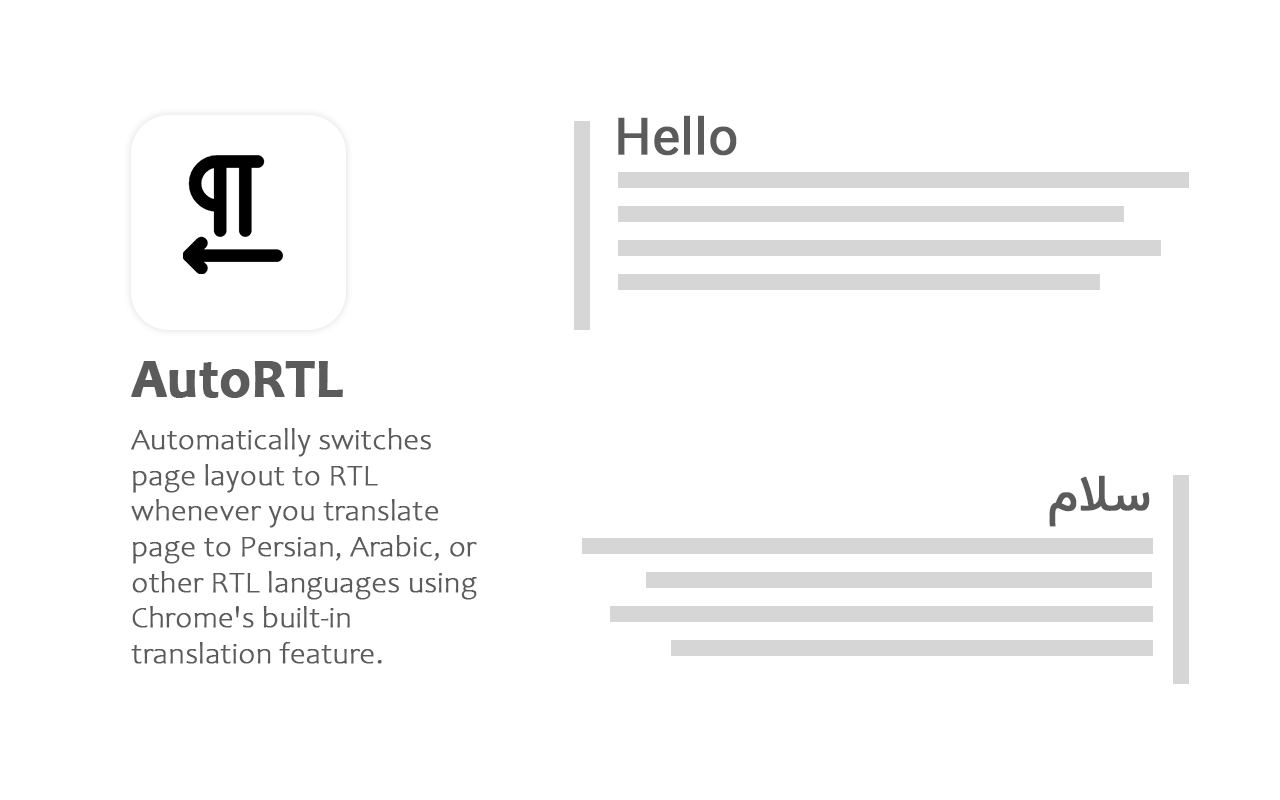
<style>
.page{position:relative;width:1280px;height:800px;background:#ffffff}
.page>*{position:absolute;margin:0}
.t1{font:51px "Vazirmatn-Regular";color:#5b5b5b;font-weight:bold}
.t2{font:54.6px "Candara-Bold";color:#5b5b5b;font-weight:bold}
.t3{font:29.7px "Candara-Light";color:#5b5b5b;font-weight:bold}
</style>
<div class="page">
<p class="t1" style="left:618px;top:115px;width:119px;height:41px">Hello</p>
<p class="t2" style="left:131px;top:361px;width:212px;height:37px">AutoRTL</p>
<p class="t3" style="left:131px;top:428px;width:346px;height:236px">Automatically switches page layout to RTL whenever you translate page to Persian, Arabic, or other RTL languages using Chrome's built-in translation feature.</p>
<p class="t1" style="left:1049px;top:475px;width:101px;height:52px">سلام</p>
</div>
